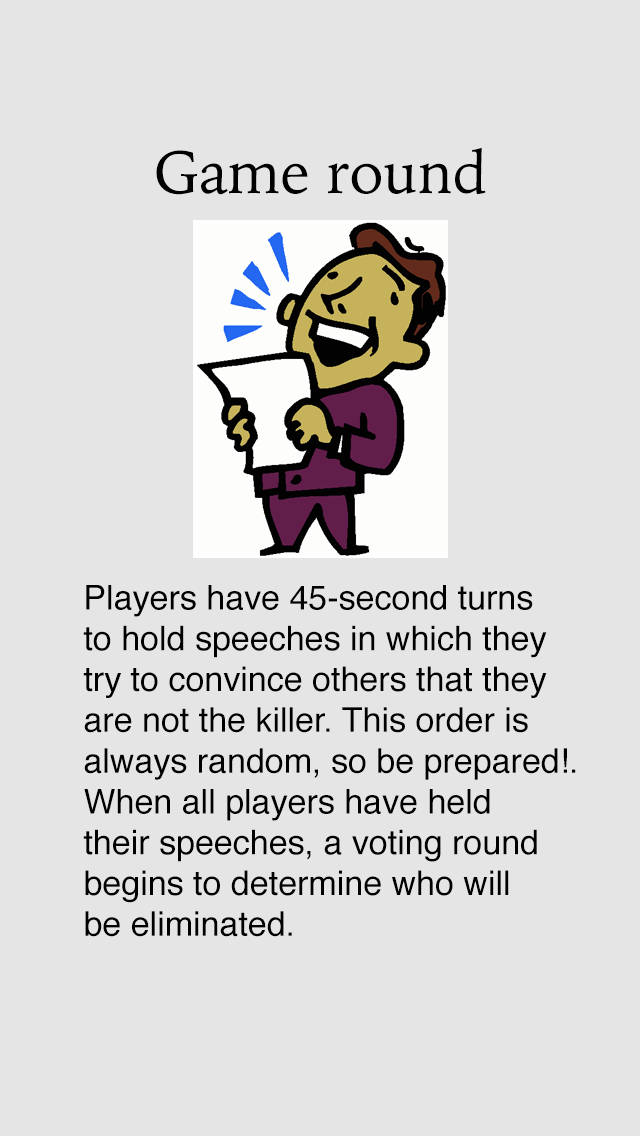
<style>
.page{position:relative;width:640px;height:1136px;background:#e5e5e5}
.page>*{position:absolute;margin:0}
.t1{font:60px "IowanOldStyle-Roman";color:#000000}
.t2{font:34px "Helvetica";color:#000000}
</style>
<div class="page">
<p class="t1" style="left:156px;top:147px;width:330px;height:48px">Game round</p>
<p class="t2" style="left:83px;top:585px;width:493px;height:352px">Players have 45-second turns<br>to hold speeches in which they<br>try to convince others that they<br>are not the killer. This order is<br>always random, so be prepared!.<br>When all players have held<br>their speeches, a voting round<br>begins to determine who will<br>be eliminated.</p>
</div>
